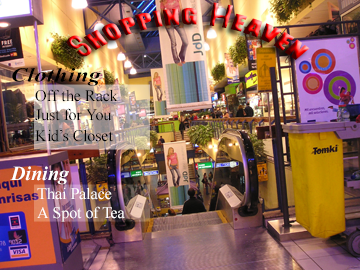
<style>
.page{position:relative;width:360px;height:270px}
.page>*{position:absolute;margin:0}
.t1{font:30px/6.2px "Impact";font-variant:small-caps;scale:1.22 1}
.t2{font:30px/6.2px "Impact";letter-spacing:-0.1em;font-variant:small-caps;scale:1.22 1}
.t3{font:30px/6.2px "Impact";letter-spacing:0.005em;font-variant:small-caps;scale:1.22 1}
.t4{font:20px "TimesNewRomanPS-BoldItalicMT";color:#000000;scale:1.19 1}
.t5{font:16px "TimesNewRomanPSMT";color:#000000}
.t6{font:20px "TimesNewRomanPS-BoldItalicMT";color:#ffffff}
.t7{font:16px "TimesNewRomanPSMT";color:#ffffff}
</style>
<div class="page">
<p class="t1" style="left:66px;top:2px;width:244px;height:58px"><span class="t2">S</span><span class="t3">ho</span>pping Heaven</p>
<p class="t4" style="left:12px;top:68px;width:89px;height:18px">Clothing</p>
<p class="t5" style="left:35px;top:89px;width:83px;height:13px">Off the Rack</p>
<p class="t5" style="left:35px;top:108px;width:77px;height:13px">Just for You</p>
<p class="t5" style="left:35px;top:129px;width:78px;height:13px">Kid’s Closet</p>
<p class="t6" style="left:10px;top:166px;width:59px;height:19px">Dining</p>
<p class="t7" style="left:37px;top:187px;width:75px;height:13px">Thai Palace</p>
<p class="t7" style="left:37px;top:206px;width:88px;height:16px">A Spot of Tea</p>
</div>
